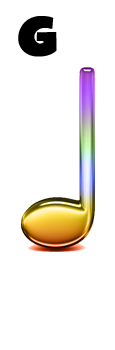
<style>
.page{position:relative;width:115px;height:350px;background:#ffffff}
.page>*{position:absolute;margin:0}
.t1{font:54px "LuckiestGuy-Regular";letter-spacing:0.005em;color:#000000;font-weight:bold;scale:1.11 1}
</style>
<div class="page">
<p class="t1" style="left:18px;top:16px;width:39px;height:41px">G</p>
</div>
